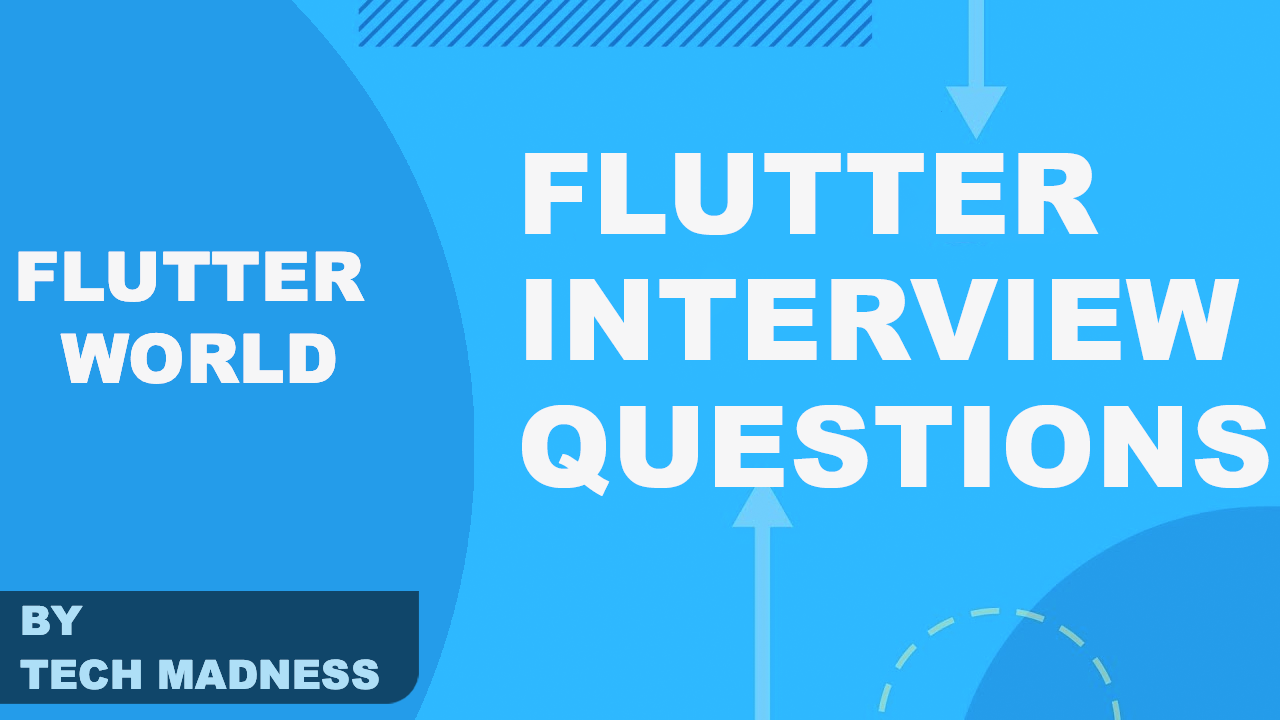
<style>
.page{position:relative;width:1280px;height:720px;background:#2eb8ff}
.page>*{position:absolute;margin:0}
.t1{font:113px/126.6px "Arial-Black";letter-spacing:0.01em;color:#f6f6f7;text-transform:uppercase}
.t2{font:68px/82px "Arial-Black";letter-spacing:0.01em;color:#f6f6f7;text-transform:uppercase}
.t3{font:40px/53.7px "Arial-Black";letter-spacing:0.01em;color:#aedff7;text-transform:uppercase}
</style>
<div class="page">
<p class="t1" style="left:522px;top:153px;width:747px;height:343px">Flutter<br>InterView<br>Questions</p>
<p class="t2" style="left:18px;top:251px;width:347px;height:133px">Flutter<br>  World</p>
<p class="t3" style="left:20px;top:605px;width:359px;height:85px">By<br>Tech Madness</p>
</div>
